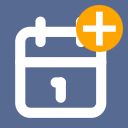
<style>
.page{position:relative;width:128px;height:128px;background:#576a92}
.page>*{position:absolute;margin:0}
.t1{font:66.7px "Lato-Bold";color:#ffffff}
</style>
<div class="page">
<p class="t1" style="left:83px;top:11px;width:33px;height:35px">+</p>
</div>
